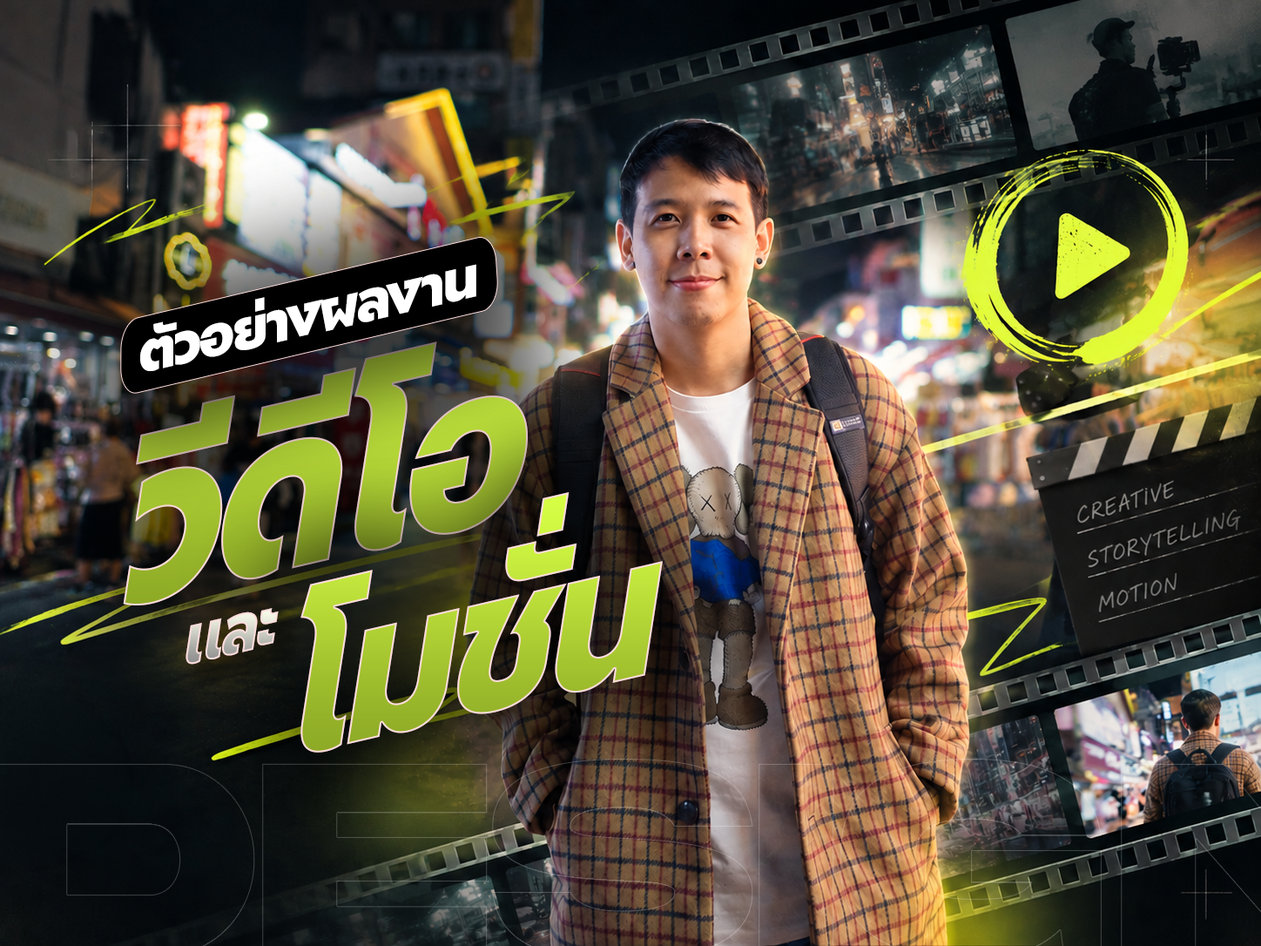
<style>
.page{position:relative;width:1261px;height:946px}
.page>*{position:absolute;margin:0}
.t1{font:55.8px "Futura100THA-Bold";letter-spacing:-0.05em;color:#ffffff}
.t2{font:232.2px "Futura100THA-Bold";letter-spacing:-0.05em;text-transform:uppercase;scale:0.85 1}
.t3{font:202.6px "Futura100THA-Bold";letter-spacing:-0.05em;text-transform:uppercase;scale:0.85 1}
.t4{font:71px "Futura100THA-Bold";letter-spacing:-0.05em;text-transform:uppercase;scale:0.85 1}
</style>
<div class="page">
<p class="t1" style="left:140px;top:264px;width:336px;height:107px;rotate:-13deg">ตัวอย่างผลงาน</p>
<p class="t2" style="left:123px;top:341px;width:406px;height:264px;rotate:-13deg">วีดีโอ</p>
<p class="t3" style="left:300px;top:492px;width:363px;height:260px;rotate:-13deg">โมชั่น</p>
<p class="t4" style="left:185px;top:608px;width:94px;height:56px;rotate:-13deg">และ</p>
</div>
